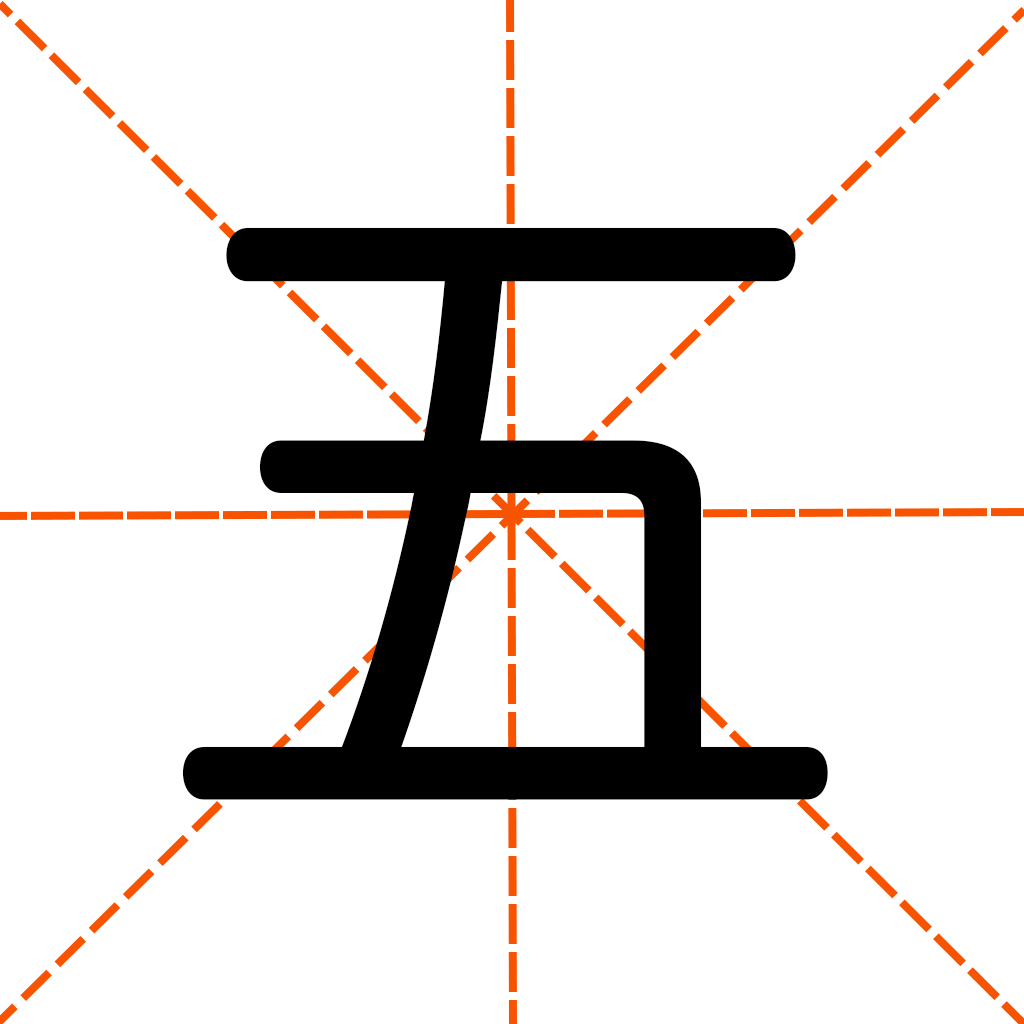
<style>
.page{position:relative;width:1024px;height:1024px;background:#ffffff}
.page>*{position:absolute;margin:0}
.t1{font:700px "HiraMaruProN-W4";color:#000000}
</style>
<div class="page">
<p class="t1" style="left:182px;top:227px;width:646px;height:573px">五</p>
</div>
